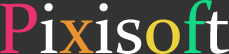
<style>
.page{position:relative;width:229px;height:54px;background:#333333}
.page>*{position:absolute;margin:0}
.t1{font:72px "Constantia";color:#ffffff}
.t2{font:72px "Constantia";color:#eb316c}
.t3{font:72px "Constantia";color:#ea9431}
.t4{font:72px "Constantia";color:#ebd13a}
.t5{font:72px "Constantia";color:#13d785}
</style>
<div class="page">
<p class="t1" style="left:0px;top:0px;width:229px;height:54px"><span class="t2">P</span>i<span class="t3">x</span>is<span class="t4">o</span><span class="t5">f</span>t</p>
</div>
